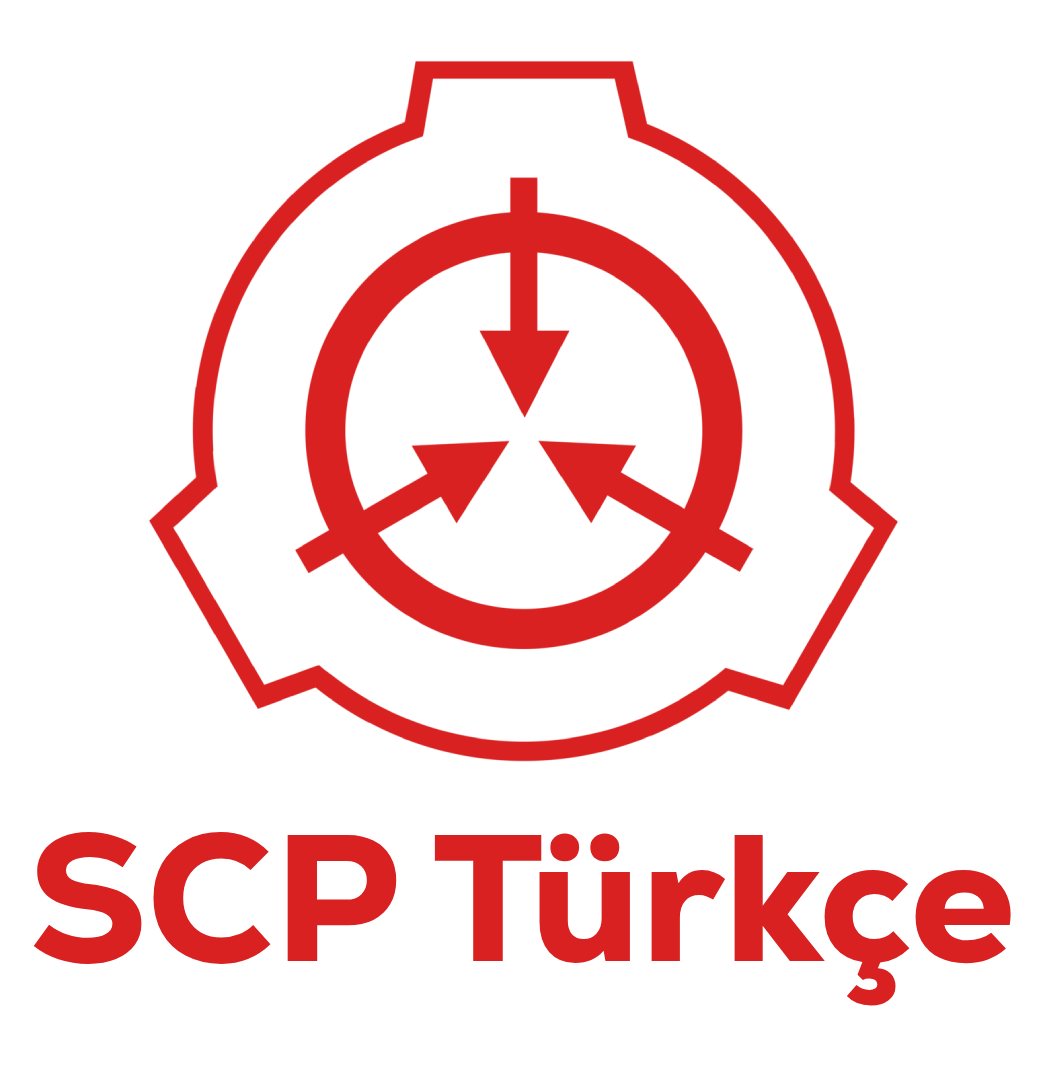
<style>
.page{position:relative;width:1046px;height:1080px;background:#ffffff}
.page>*{position:absolute;margin:0}
.t1{font:180px "Nexa-Heavy";color:#d92121}
</style>
<div class="page">
<p class="t1" style="left:33px;top:832px;width:978px;height:174px">SCP Türkçe</p>
</div>
